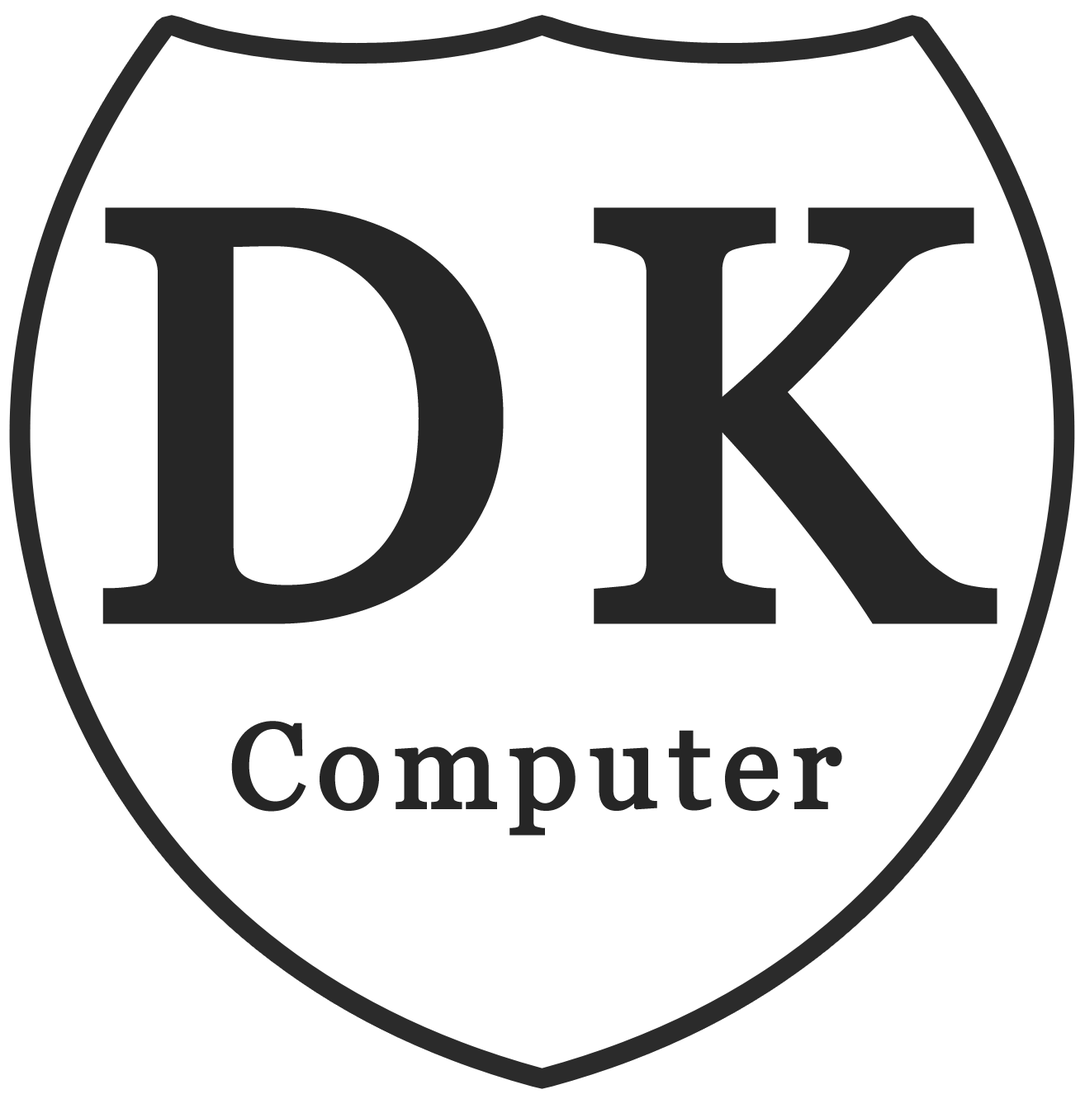
<style>
.page{position:relative;width:1085px;height:1099px;background:#ffffff}
.page>*{position:absolute;margin:0}
.t1{font:577.9px "Georgia";letter-spacing:0.07em;color:#262626;font-weight:bold}
.t2{font:119.4px "Georgia";letter-spacing:0.07em;color:#262626;font-weight:bold}
</style>
<div class="page">
<p class="t1" style="left:102px;top:207px;width:895px;height:417px">DK</p>
<p class="t2" style="left:231px;top:721px;width:611px;height:115px">Computer</p>
</div>
